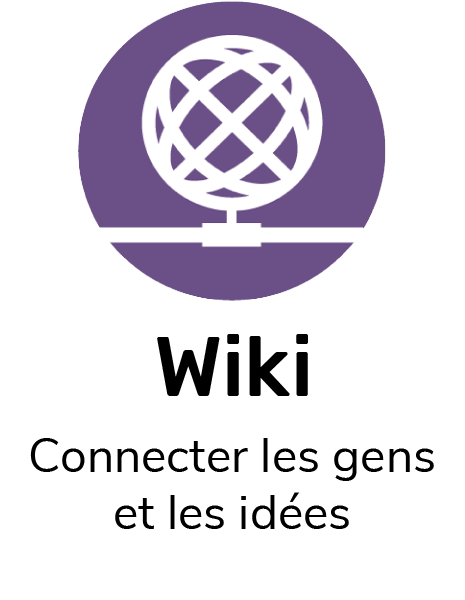
<style>
.page{position:relative;width:465px;height:600px;background:#ffffff}
.page>*{position:absolute;margin:0}
.t1{font:84px "Rubik-Medium";color:#000000}
.t2{font:48px "NunitoSans-Regular";color:#000000}
</style>
<div class="page">
<p class="t1" style="left:157px;top:334px;width:151px;height:62px">Wiki</p>
<p class="t2" style="left:30px;top:438px;width:404px;height:91px;text-align:center">Connecter les gens et les idées</p>
</div>
